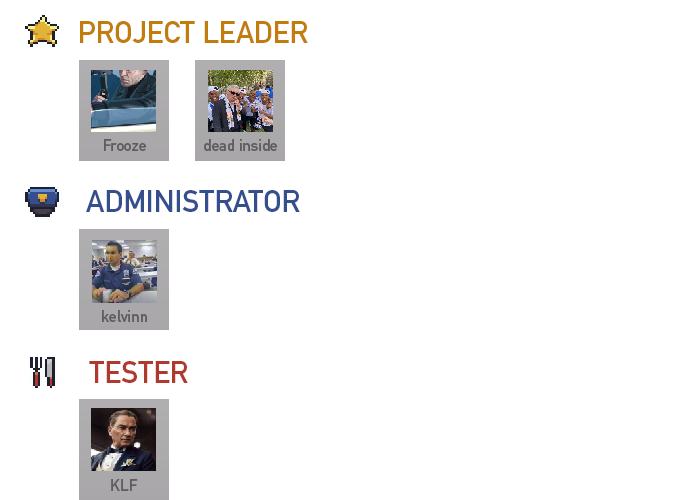
<style>
.page{position:relative;width:697px;height:500px;background:#ffffff}
.page>*{position:absolute;margin:0}
.t1{font:15.7px "DINMittelschriftStd";color:#5f5e5f}
</style>
<div class="page">
<p class="t1" style="left:104px;top:139px;width:42px;height:12px">Frooze</p>
<p class="t1" style="left:204px;top:139px;width:73px;height:12px">dead inside</p>
<p class="t1" style="left:102px;top:310px;width:45px;height:12px">kelvinn</p>
<p class="t1" style="left:111px;top:479px;width:27px;height:12px">KLF</p>
</div>
